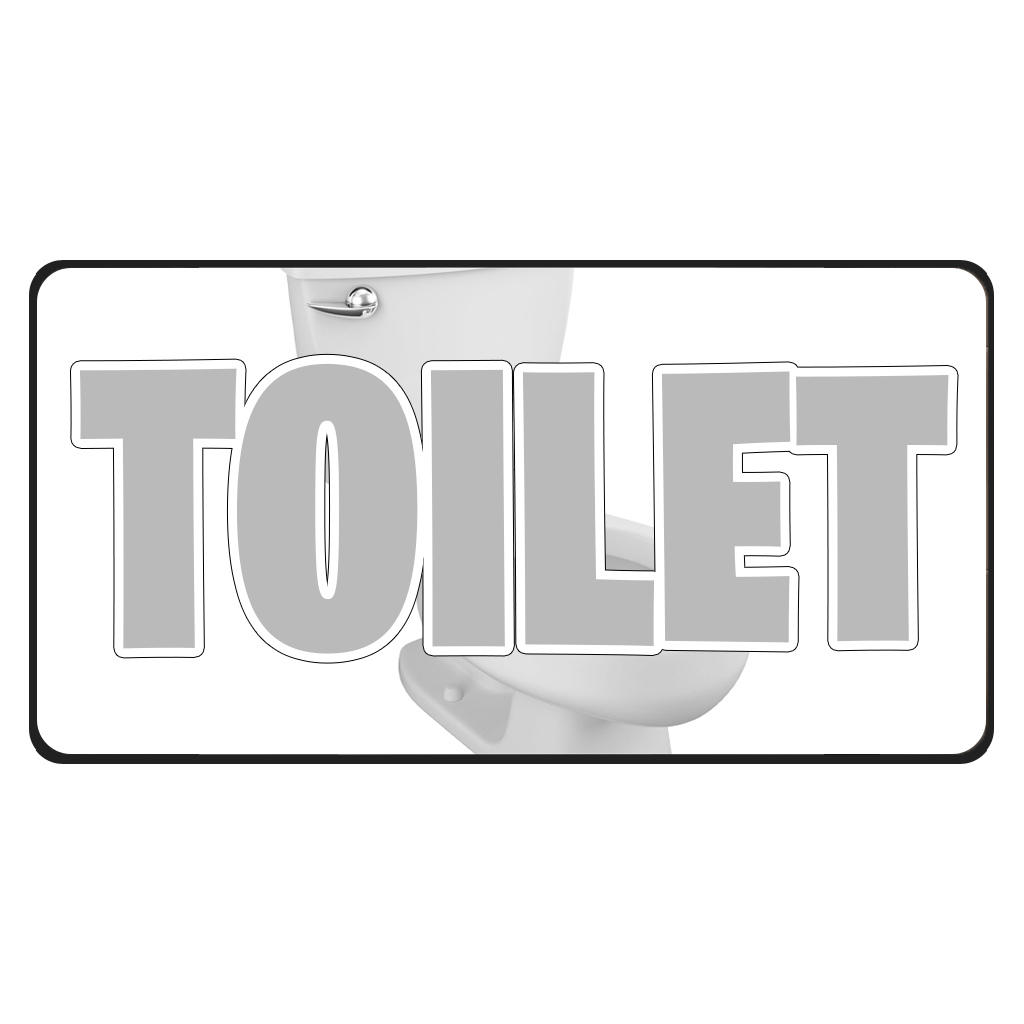
<style>
.page{position:relative;width:1024px;height:1024px;background:#ffffff}
.page>*{position:absolute;margin:0}
.t1{font:397.3px "BurbankBigCondensed-Black";color:#bababa}
</style>
<div class="page">
<p class="t1" style="left:79px;top:363px;width:870px;height:291px">TOILET</p>
</div>
